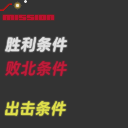
<style>
.page{position:relative;width:128px;height:128px;background:#333333}
.page>*{position:absolute;margin:0}
.t1{font:16px "FZLTHProGlobal-Demibold";color:#e2e2e2;font-style:italic;scale:0.97 1}
.t2{font:16px "FZLTHProGlobal-Demibold";color:#c11c3a;font-style:italic;scale:0.97 1}
.t3{font:16px "FZLTHProGlobal-Demibold";color:#e2e24b;font-style:italic;scale:0.97 1}
</style>
<div class="page">
<p class="t1" style="left:5px;top:37px;width:62px;height:15px">胜利条件</p>
<p class="t2" style="left:5px;top:61px;width:62px;height:15px">败北条件</p>
<p class="t3" style="left:5px;top:101px;width:61px;height:15px">出击条件</p>
</div>
